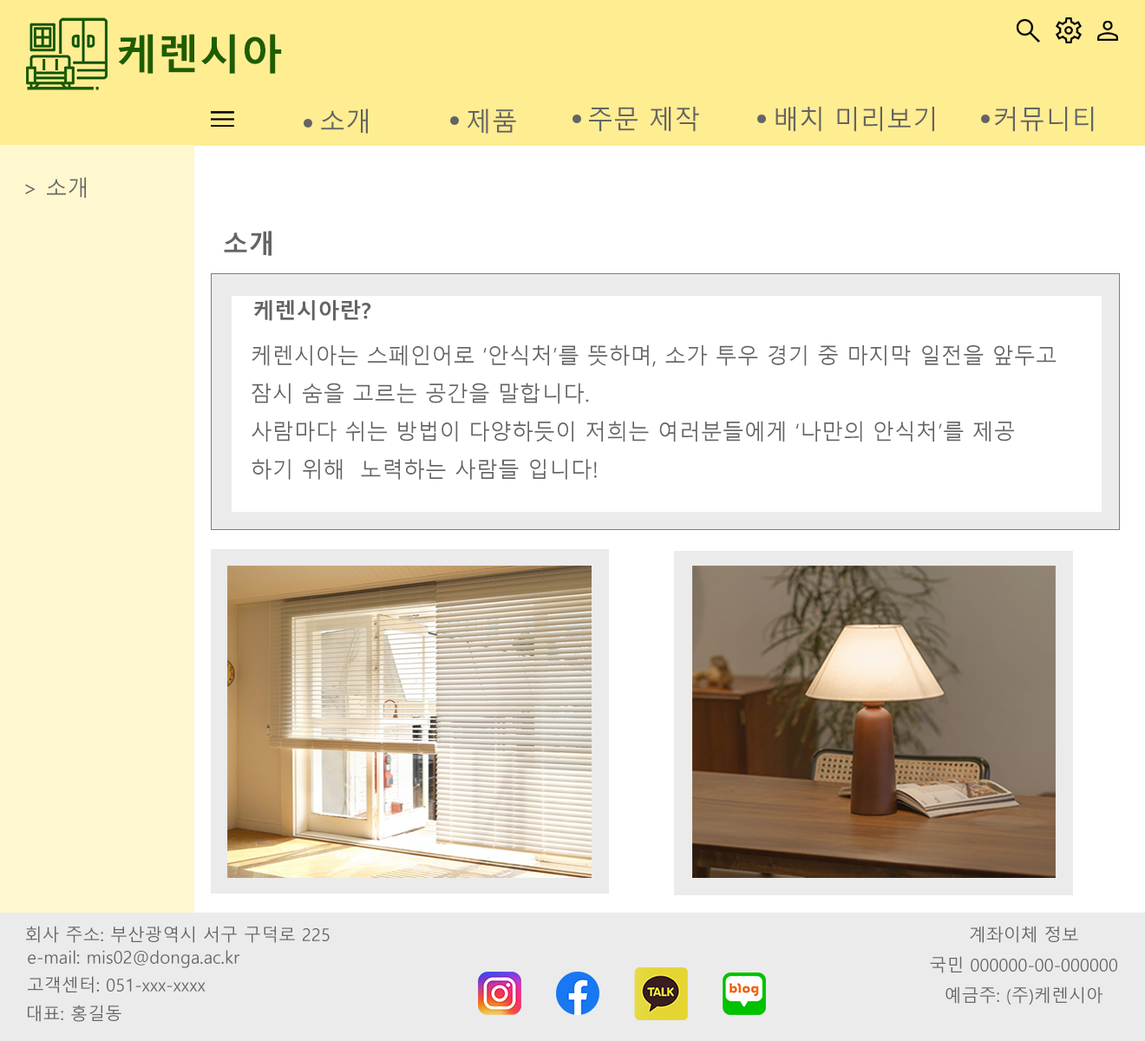
<style>
.page{position:relative;width:1145px;height:1041px;background:#ffffff}
.page>*{position:absolute;margin:0}
.t1{font:41.6px "MalgunGothicBold";color:#1d5d00}
.t2{font:26px "MalgunGothic";color:#646464}
.t3{font:21.7px "MalgunGothic";color:#646464}
.t4{font:26px "MalgunGothicBold";color:#646464}
.t5{font:21.7px "MalgunGothicBold";color:#646464}
.t6{font:17.4px "MalgunGothic";color:#646464}
</style>
<div class="page">
<p class="t1" style="left:118px;top:34px;width:164px;height:40px">케렌시아</p>
<p class="t2" style="left:321px;top:108px;width:47px;height:26px">소개</p>
<p class="t2" style="left:467px;top:108px;width:49px;height:26px">제품</p>
<p class="t2" style="left:589px;top:107px;width:110px;height:25px">주문 제작</p>
<p class="t2" style="left:776px;top:107px;width:158px;height:25px">배치 미리보기</p>
<p class="t2" style="left:994px;top:107px;width:100px;height:25px">커뮤니티</p>
<p class="t3" style="left:25px;top:177px;width:61px;height:21px">&gt; 소개</p>
<p class="t4" style="left:224px;top:231px;width:48px;height:25px">소개</p>
<p class="t5" style="left:254px;top:299px;width:117px;height:22px">케렌시아란?</p>
<p class="t3" style="left:252px;top:345px;width:805px;height:135px">케렌시아는 스페인어로 ‘안식처’를 뜻하며, 소가 투우 경기 중 마지막 일전을 앞두고 <br>잠시 숨을 고르는 공간을 말합니다. <br>사람마다 쉬는 방법이 다양하듯이 저희는 여러분들에게 ‘나만의 안식처’를 제공<br>하기 위해  노력하는 사람들 입니다!</p>
<p class="t6" style="left:26px;top:926px;width:304px;height:17px">회사 주소: 부산광역시 서구 구덕로 225</p>
<p class="t6" style="left:930px;top:926px;width:188px;height:79px;text-align:center">계좌이체 정보<br>국민 000000-00-000000<br>예금주: (주)케렌시아</p>
<p class="t6" style="left:28px;top:950px;width:211px;height:18px">e-mail: mis02@donga.ac.kr</p>
<p class="t6" style="left:28px;top:976px;width:178px;height:17px">고객센터: 051-xxx-xxxx</p>
<p class="t6" style="left:28px;top:1005px;width:93px;height:17px">대표: 홍길동</p>
</div>
